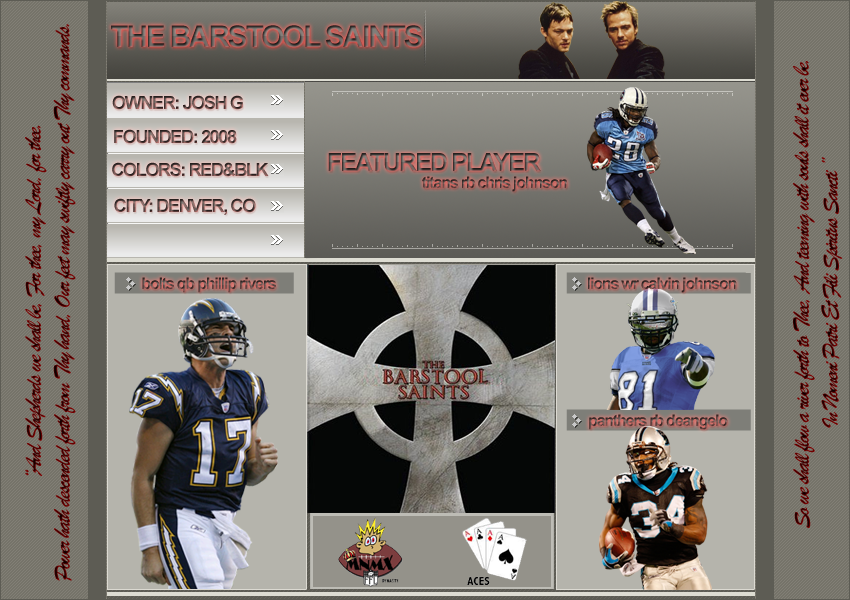
<style>
.page{position:relative;width:850px;height:600px}
.page>*{position:absolute;margin:0}
.t1{font:24px "BrushScriptMT";letter-spacing:-0.075em}
.t2{font:30px "Arial-BoldMT";letter-spacing:-0.075em}
.t3{font:18px "Arial-BoldMT";letter-spacing:-0.075em}
.t4{font:25px "Arial-BoldMT";letter-spacing:-0.075em}
.t5{font:16px "Arial-BoldMT";letter-spacing:-0.075em}
</style>
<div class="page">
<p class="t1" style="left:25px;top:24px;width:51px;height:557px;text-align:center;rotate:-90deg">“And Shepherds we shall be, For thee, my Lord, for thee.<br>Power hath descended forth from Thy hand, Our feet may swiftly carry out Thy commands.</p>
<p class="t2" style="left:111px;top:25px;width:312px;height:23px">THE BARSTOOL SAINTS</p>
<p class="t1" style="left:793px;top:61px;width:50px;height:467px;text-align:center;rotate:-90deg">So we shall flow a river forth to Thee, And teeming with souls shall it ever be.<br>In Nomeni Patri Et Fili Spiritus Sancti ”</p>
<p class="t3" style="left:112px;top:95px;width:131px;height:15px">OWNER: JOSH G</p>
<p class="t3" style="left:114px;top:129px;width:123px;height:15px">FOUNDED: 2008</p>
<p class="t4" style="left:328px;top:153px;width:213px;height:19px">FEATURED PLAYER</p>
<p class="t3" style="left:112px;top:162px;width:157px;height:15px">COLORS: RED&amp;BLK</p>
<p class="t5" style="left:422px;top:176px;width:145px;height:16px">titans rb chris johnson</p>
<p class="t3" style="left:114px;top:198px;width:142px;height:17px">CITY: DENVER, CO</p>
<p class="t5" style="left:142px;top:277px;width:134px;height:16px">bolts qb phillip rivers</p>
<p class="t5" style="left:588px;top:277px;width:149px;height:16px">lions wr calvin johnson</p>
<p class="t5" style="left:589px;top:414px;width:139px;height:16px">panthers rb deangelo</p>
</div>
